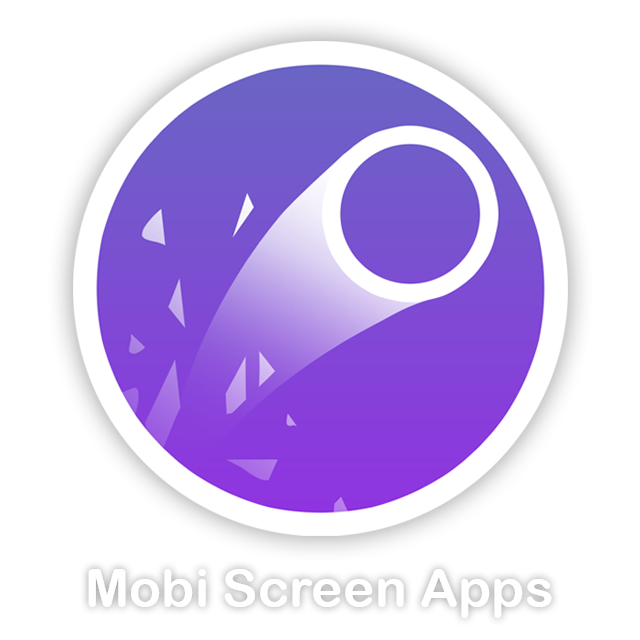
<style>
.page{position:relative;width:640px;height:640px;background:#ffffff}
.page>*{position:absolute;margin:0}
.t1{font:53.2px "ArialRoundedMTBold";color:#ffffff}
</style>
<div class="page">
<p class="t1" style="left:88px;top:569px;width:464px;height:49px">Mobi Screen Apps</p>
</div>
